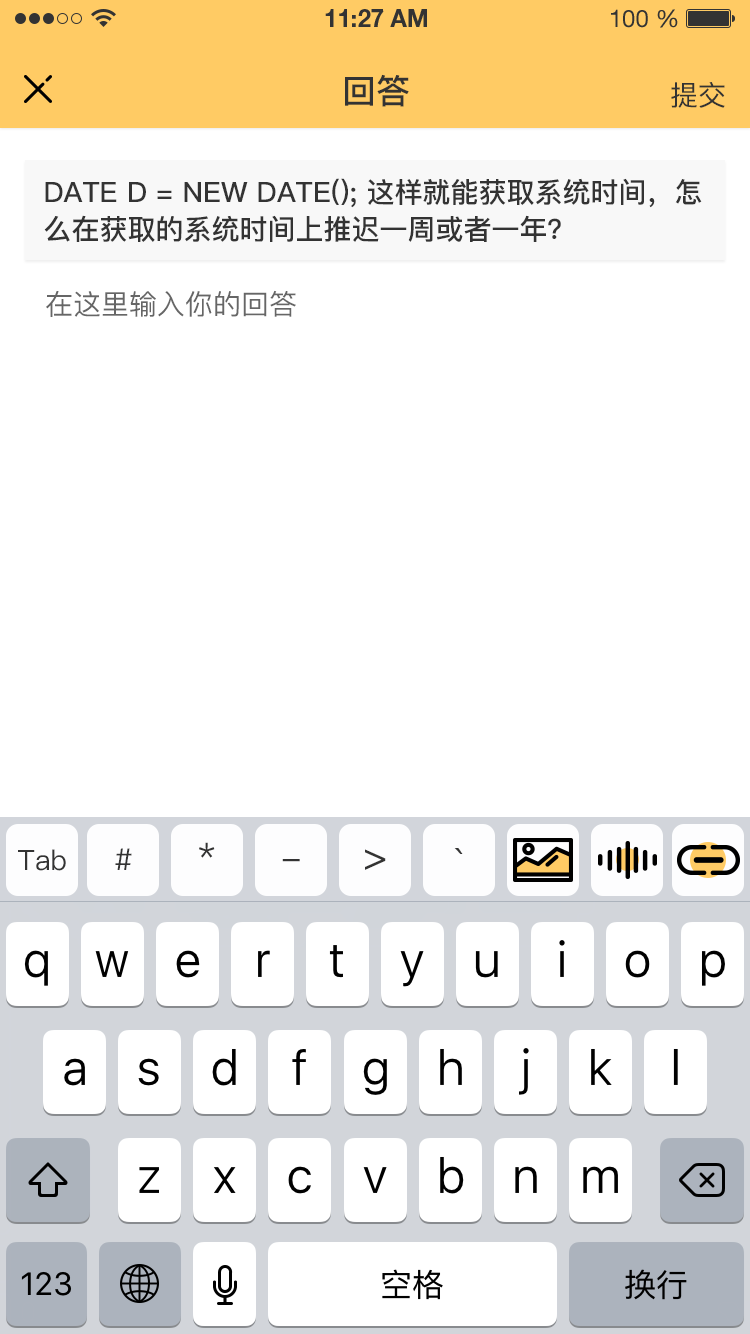
<style>
.page{position:relative;width:750px;height:1334px;background:#ffffff}
.page>*{position:absolute;margin:0}
.t1{font:34px "PingFang-SC-Bold";color:#333333;text-transform:uppercase}
.t2{font:28px "PingFang-SC-Medium";color:#333333;text-transform:uppercase}
.t3{font:28px/37px "PingFang-SC-Bold";color:#333333;text-transform:uppercase}
.t4{font:28px "PingFang-SC-Medium";color:#666666;text-transform:uppercase}
.t5{font:34px "PingFang-SC-Medium";color:#333333}
.t6{font:28px "PingFang-SC-Medium";color:#333333}
.t7{font:30px "PingFang-SC-Medium";color:#333333}
.t8{font:40px "PingFang-SC-Medium";color:#333333}
</style>
<div class="page">
<p class="t1" style="left:345px;top:74px;width:64px;height:33px">回答</p>
<p class="t2" style="left:671px;top:82px;width:54px;height:26px">提交</p>
<p class="t3" style="left:44px;top:178px;width:658px;height:64px">Date d = new Date(); 这样就能获取系统时间，怎<br>么在获取的系统时间上推迟一周或者一年？</p>
<p class="t4" style="left:46px;top:290px;width:250px;height:27px">在这里输入你的回答</p>
<p class="t5" style="left:199px;top:842px;width:16px;height:16px">*</p>
<p class="t6" style="left:18px;top:849px;width:48px;height:22px"><span class="t2">T</span>ab</p>
<p class="t7" style="left:115px;top:848px;width:17px;height:22px">#</p>
<p class="t8" style="left:365px;top:849px;width:21px;height:21px">&gt;</p>
<p class="t8" style="left:454px;top:848px;width:9px;height:6px">`</p>
<p class="t5" style="left:282px;top:859px;width:18px;height:3px">-</p>
</div>
